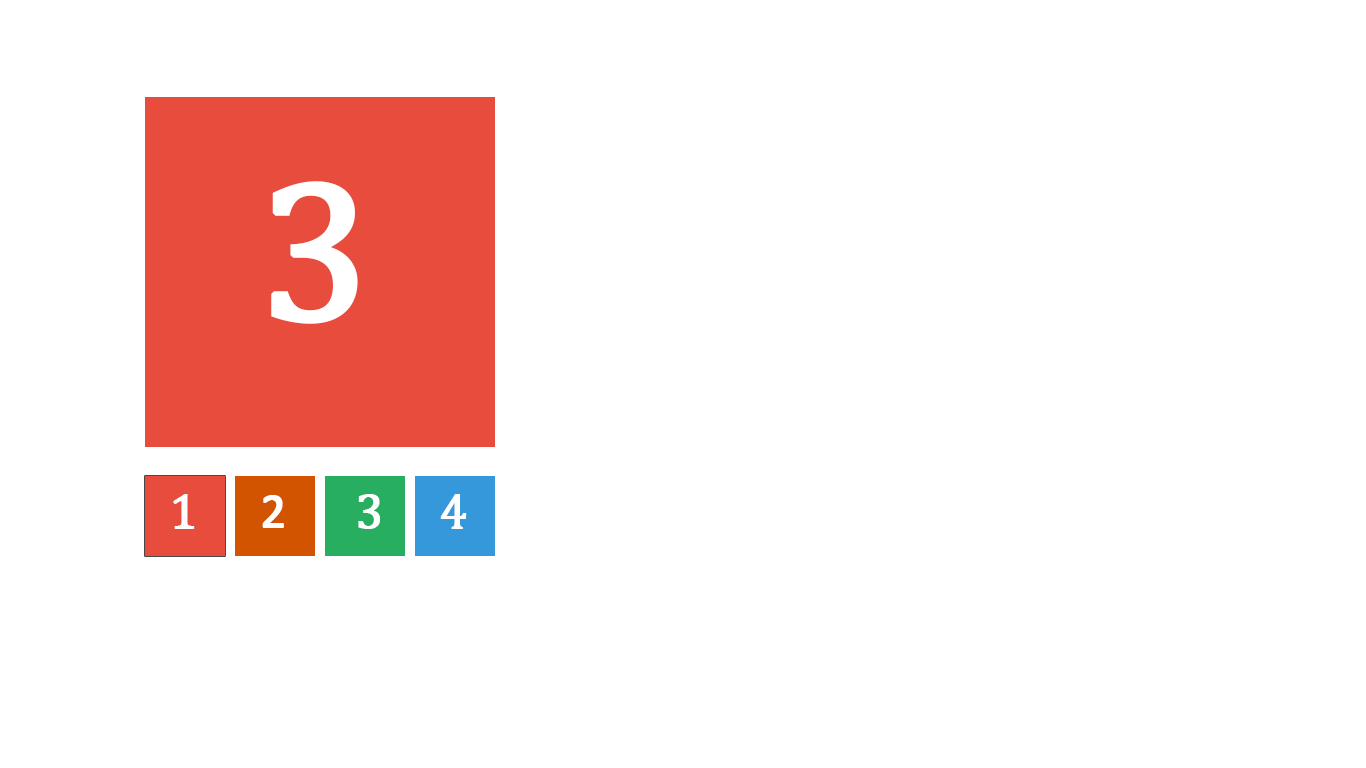
<style>
.page{position:relative;width:1366px;height:768px;background:#ffffff}
.page>*{position:absolute;margin:0}
.t1{font:200px "Cambria";color:#ffffff;text-transform:uppercase;font-weight:bold}
.t2{font:50px "Cambria";color:#ffffff;text-transform:uppercase;font-weight:bold}
.t3{font:50px "Calibri";color:#ffffff;text-transform:uppercase;font-weight:bold}
</style>
<div class="page">
<p class="t1" style="left:271px;top:181px;width:87px;height:143px">3</p>
<p class="t2" style="left:173px;top:494px;width:22px;height:35px">1</p>
<p class="t3" style="left:262px;top:495px;width:22px;height:33px">2</p>
<p class="t2" style="left:358px;top:494px;width:22px;height:35px">3</p>
<p class="t2" style="left:440px;top:494px;width:27px;height:35px">4</p>
</div>
